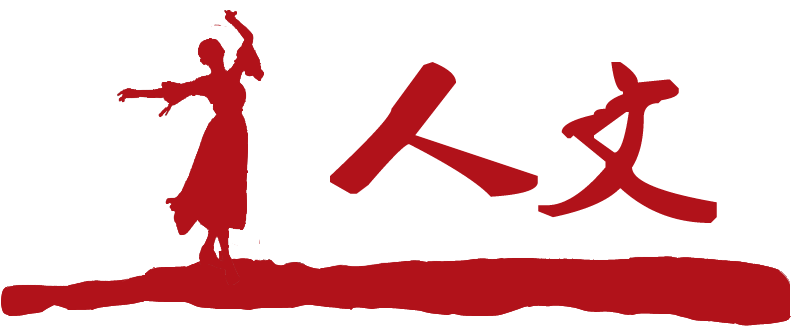
<style>
.page{position:relative;width:799px;height:328px;background:#ffffff}
.page>*{position:absolute;margin:0}
.t1{font:186.6px "Ò¶¸ùÓÑÃ«±ÊÐÐÊé";color:#b1121a}
</style>
<div class="page">
<p class="t1" style="left:330px;top:62px;width:387px;height:161px">人文</p>
</div>
